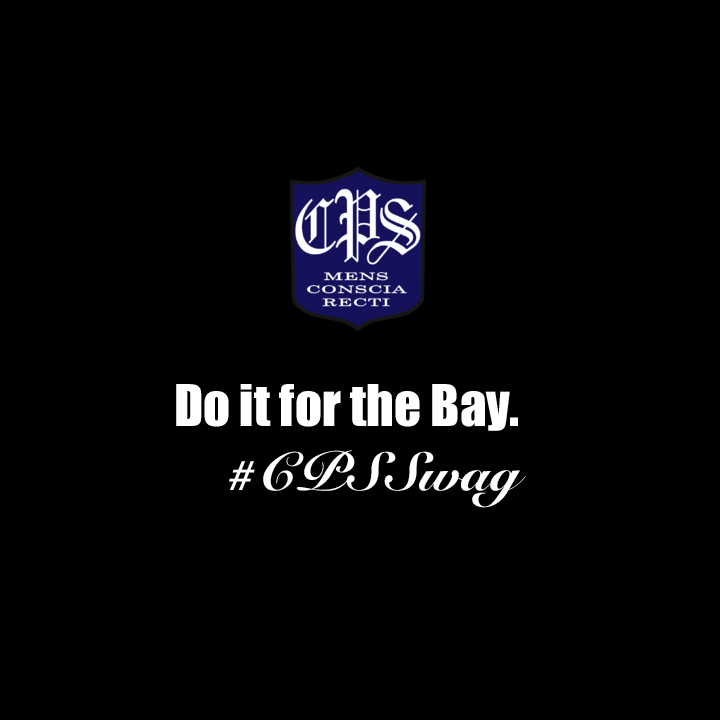
<style>
.page{position:relative;width:720px;height:720px;background:#000000}
.page>*{position:absolute;margin:0}
.t1{font:53px "Impact";color:#ffffff}
.t2{font:72px "Impact";color:#071f42}
.t3{font:53px "SnellRoundhand-Black";color:#ffffff}
</style>
<div class="page">
<p class="t1" style="left:176px;top:384px;width:350px;height:124px;text-align:right"><span class="t2"><br><br><br></span>Do it for the Bay.<br><span class="t3">#CPSSwag</span></p>
</div>
